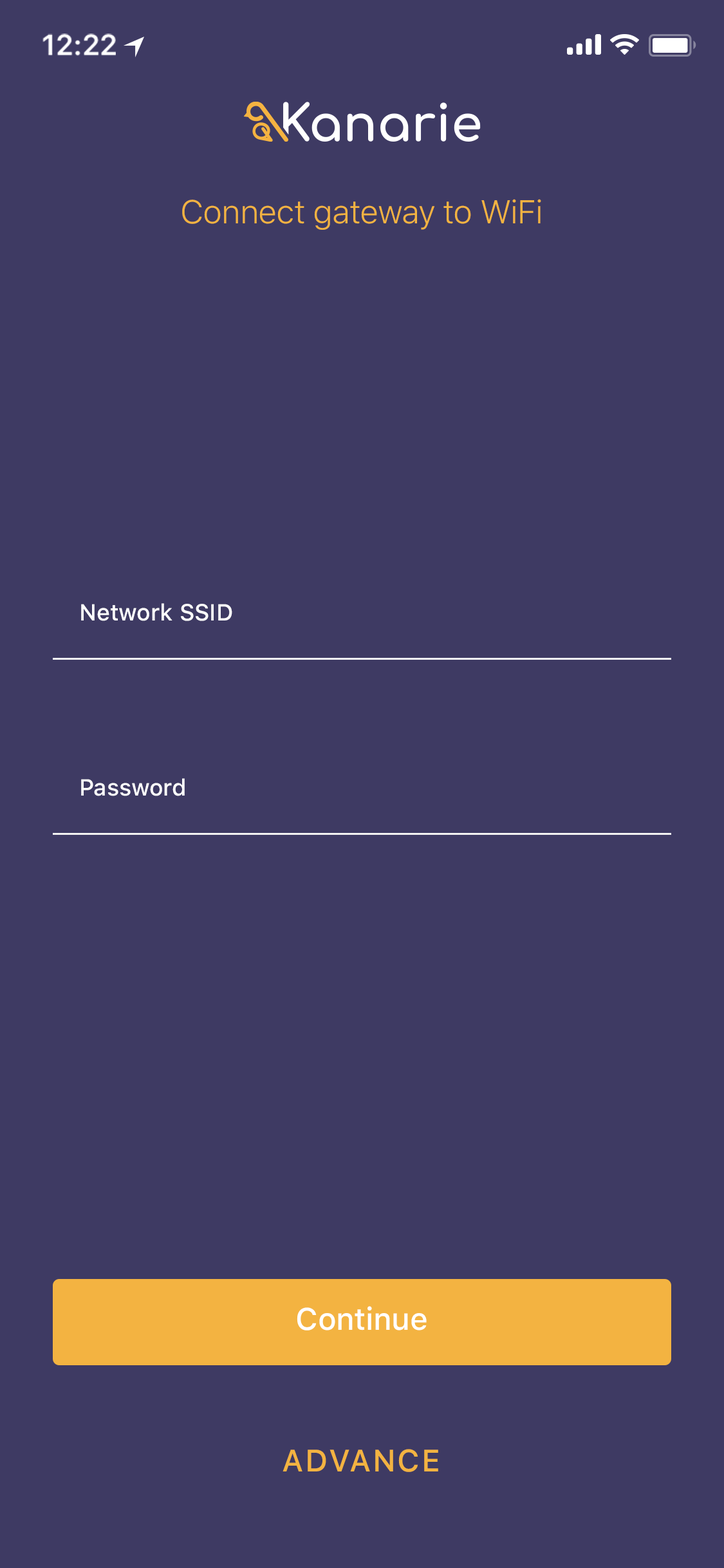
<style>
.page{position:relative;width:724px;height:1568px;background:#3e3a63}
.page>*{position:absolute;margin:0}
.t1{font:29px "SFProText-Semibold";letter-spacing:-0.02em;color:#ffffff}
.t2{font:32.8px "SFProText-Light";letter-spacing:-0.024em;color:#f3b341}
.t3{font:23.2px "SFProText-Medium";color:#ffffff}
.t4{font:30.9px "SFProText-Medium";letter-spacing:-0.01em;color:#ffffff}
.t5{font:30.9px "SFProText-Medium";letter-spacing:0.05em;color:#f3b341;text-transform:uppercase}
</style>
<div class="page">
<p class="t1" style="left:42px;top:33px;width:74px;height:23px">12:22</p>
<p class="t2" style="left:182px;top:199px;width:359px;height:31px">Connect gateway to WiFi</p>
<p class="t3" style="left:81px;top:603px;width:151px;height:18px">Network SSID</p>
<p class="t3" style="left:81px;top:778px;width:104px;height:18px">Password</p>
<p class="t4" style="left:297px;top:1306px;width:130px;height:24px">Continue</p>
<p class="t5" style="left:283px;top:1449px;width:155px;height:23px">Advance</p>
</div>
